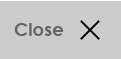
<style>
.page{position:relative;width:121px;height:59px;background:#cccccc}
.page>*{position:absolute;margin:0}
.t1{font:18.3px "CenturyGothic-Bold";color:#656565}
</style>
<div class="page">
<p class="t1" style="left:14px;top:23px;width:50px;height:13px">Close</p>
</div>
